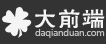
<style>
.page{position:relative;width:106px;height:44px;background:#333333}
.page>*{position:absolute;margin:0}
.t1{font:24px "FZHLK--GBK1-0";letter-spacing:0.01em;color:#ffffff}
.t2{font:9px "MicrosoftYaHei";letter-spacing:-0.02em;color:#c3c3c3}
</style>
<div class="page">
<p class="t1" style="left:34px;top:9px;width:71px;height:19px;opacity:0.95">大前端</p>
<p class="t2" style="left:35px;top:29px;width:70px;height:9px">daqianduan.com</p>
</div>
